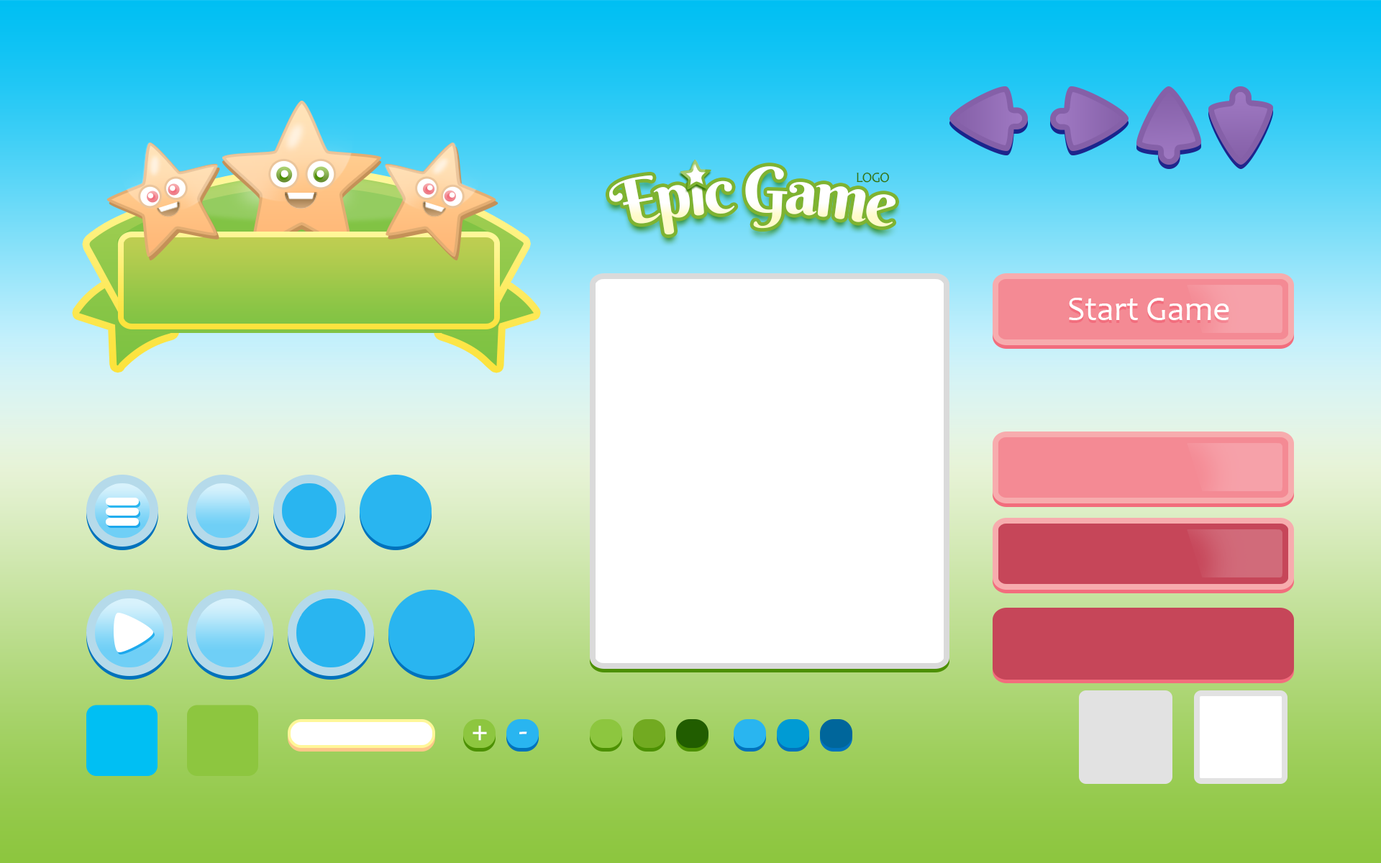
<style>
.page{position:relative;width:1381px;height:863px}
.page>*{position:absolute;margin:0}
.t1{font:63.2px "BerkshireSwash-Regular";letter-spacing:-0.05em;color:#ffffff}
.t2{font:14.4px "Candara";letter-spacing:-0.05em;color:#357605}
.t3{font:34.5px "Candara";color:#ffffff}
</style>
<div class="page">
<p class="t1" style="left:609px;top:166px;width:287px;height:69px">Epic Game</p>
<p class="t2" style="left:857px;top:172px;width:33px;height:11px">LOGO</p>
<p class="t3" style="left:1069px;top:298px;width:160px;height:22px">Start Game</p>
<p class="t3" style="left:473px;top:726px;width:14px;height:15px">+</p>
<p class="t3" style="left:519px;top:732px;width:8px;height:3px">-</p>
</div>
